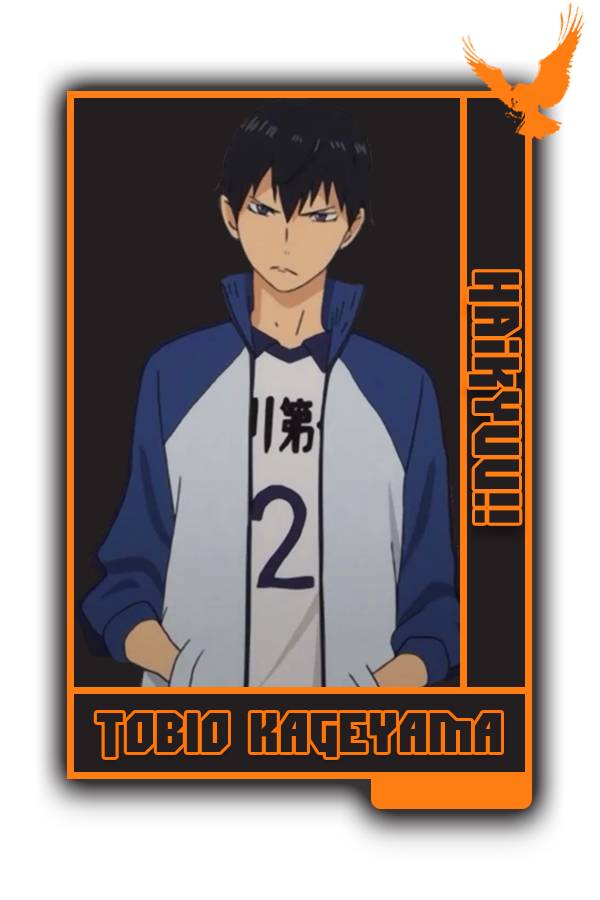
<style>
.page{position:relative;width:600px;height:900px;background:#ffffff}
.page>*{position:absolute;margin:0}
.t1{font:62.9px "Dimitri";color:#231f20}
.t2{font:55.4px "Dimitri";color:#231f20}
</style>
<div class="page">
<p class="t1" style="left:469px;top:272px;width:51px;height:251px;rotate:90deg">Haikyuu!!</p>
<p class="t2" style="left:96px;top:713px;width:405px;height:44px">TOBIO KAGEYAMA</p>
</div>
